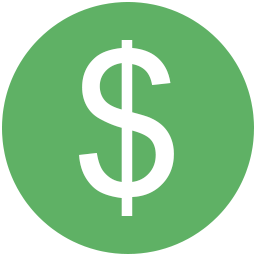
<style>
.page{position:relative;width:256px;height:256px;background:#5fb165}
.page>*{position:absolute;margin:0}
.t1{font:200px "ArialMT";color:#ffffff}
</style>
<div class="page">
<p class="t1" style="left:79px;top:40px;width:95px;height:176px">$</p>
</div>
